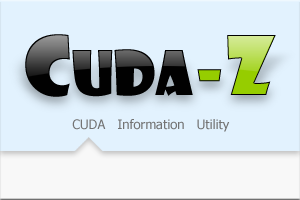
<style>
.page{position:relative;width:300px;height:200px;background:#e2f2fe}
.page>*{position:absolute;margin:0}
.t1{font:60px "ShowcardGothic-Reg"}
.t2{font:80px "ShowcardGothic-Reg"}
.t3{font:13px "Tahoma";color:#6f6f6f}
</style>
<div class="page">
<p class="t1" style="left:25px;top:34px;width:251px;height:63px"><span class="t2">C</span>UDA<span class="t2">-Z</span></p>
<p class="t3" style="left:72px;top:119px;width:158px;height:13px;opacity:0.97">CUDA   Information   Utility</p>
</div>
